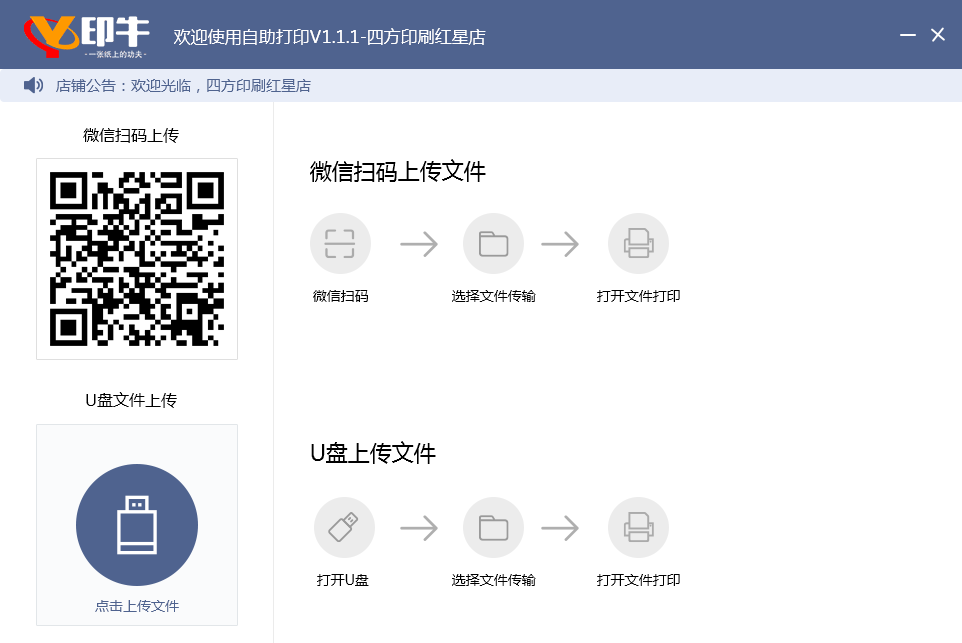
<style>
.page{position:relative;width:962px;height:643px;background:#ffffff}
.page>*{position:absolute;margin:0}
.t1{font:17px "MicrosoftYaHei";color:#ffffff}
.t2{font:15px "MicrosoftYaHei";color:#4f638f}
.t3{font:16px "MicrosoftYaHei";color:#000000}
.t4{font:22px "MicrosoftYaHei";color:#000000}
.t5{font:14px "MicrosoftYaHei";color:#000000}
.t6{font:14px "MicrosoftYaHei";color:#4f638f}
</style>
<div class="page">
<p class="t1" style="left:174px;top:28px;width:312px;height:17px">欢迎使用自助打印V1.1.1-四方印刷红星店</p>
<p class="t2" style="left:56px;top:79px;width:255px;height:14px">店铺公告：欢迎光临，四方印刷红星店</p>
<p class="t3" style="left:83px;top:128px;width:96px;height:15px">微信扫码上传</p>
<p class="t4" style="left:310px;top:159px;width:176px;height:23px">微信扫码上传文件</p>
<p class="t5" style="left:313px;top:290px;width:55px;height:12px">微信扫码</p>
<p class="t5" style="left:452px;top:290px;width:84px;height:12px">选择文件传输</p>
<p class="t5" style="left:597px;top:290px;width:83px;height:12px">打开文件打印</p>
<p class="t3" style="left:86px;top:392px;width:91px;height:16px">U盘文件上传</p>
<p class="t4" style="left:311px;top:441px;width:125px;height:23px">U盘上传文件</p>
<p class="t5" style="left:317px;top:574px;width:52px;height:12px">打开U盘</p>
<p class="t5" style="left:452px;top:574px;width:84px;height:12px">选择文件传输</p>
<p class="t5" style="left:597px;top:574px;width:83px;height:12px">打开文件打印</p>
<p class="t6" style="left:95px;top:600px;width:84px;height:12px">点击上传文件</p>
</div>
